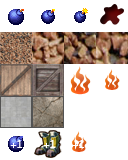
<style>
.page{position:relative;width:128px;height:160px;background:#ffffff}
.page>*{position:absolute;margin:0}
.t1{font:10px "Monaco";color:#ffffff}
</style>
<div class="page">
<p class="t1" style="left:10px;top:140px;width:13px;height:8px">+1</p>
<p class="t1" style="left:43px;top:140px;width:13px;height:8px">+1</p>
<p class="t1" style="left:72px;top:140px;width:13px;height:8px">+1</p>
</div>
